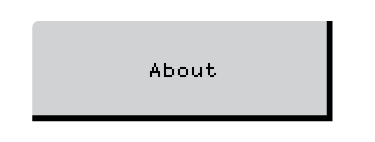
<style>
.page{position:relative;width:375px;height:142px;background:#d1d2d4}
.page>*{position:absolute;margin:0}
.t1{font:16px "Mono0756";color:#000000}
</style>
<div class="page">
<p class="t1" style="left:149px;top:62px;width:68px;height:16px">About</p>
</div>
